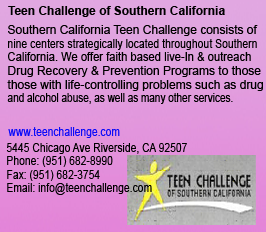
<style>
.page{position:relative;width:266px;height:232px}
.page>*{position:absolute;margin:0}
.t1{font:12px "Arial-BoldMT";color:#000000}
.t2{font:12px "ArialMT";color:#000000}
.t3{font:12px "ArialMT";color:#000000;scale:0.87 1}
.t4{font:12px "ArialMT";color:#000000;scale:0.93 1}
.t5{font:12px "ArialMT";color:#000000;scale:0.83 1}
.t6{font:12px "ArialMT";color:#0b0bf9;scale:0.86 1}
.t7{font:12px "ArialMT";color:#000000;scale:0.86 1}
</style>
<div class="page">
<p class="t1" style="left:8px;top:6px;width:217px;height:11px">Teen Challenge of Southern California</p>
<p class="t2" style="left:8px;top:25px;width:250px;height:11px">Southern California Teen Challenge consists of</p>
<p class="t3" style="left:8px;top:39px;width:249px;height:11px">nine centers strategically located throughout Southern</p>
<p class="t4" style="left:8px;top:52px;width:243px;height:9px">California. We offer faith based live-In &amp; outreach</p>
<p class="t2" style="left:8px;top:66px;width:253px;height:11px">Drug Recovery &amp; Prevention Programs to those</p>
<p class="t2" style="left:7px;top:80px;width:256px;height:11px">those with life-controlling problems such as drug</p>
<p class="t5" style="left:7px;top:93px;width:226px;height:11px">and alcohol abuse, as well as many other services.</p>
<p class="t6" style="left:8px;top:127px;width:112px;height:11px">www.teenchallenge.com</p>
<p class="t7" style="left:6px;top:143px;width:181px;height:11px">5445 Chicago Ave Riverside, CA 92507</p>
<p class="t7" style="left:7px;top:156px;width:106px;height:11px">Phone: (951) 682-8990</p>
<p class="t7" style="left:7px;top:170px;width:93px;height:11px">Fax: (951) 682-3754</p>
<p class="t7" style="left:7px;top:183px;width:145px;height:12px">Email: info@teenchallenge.com</p>
</div>
